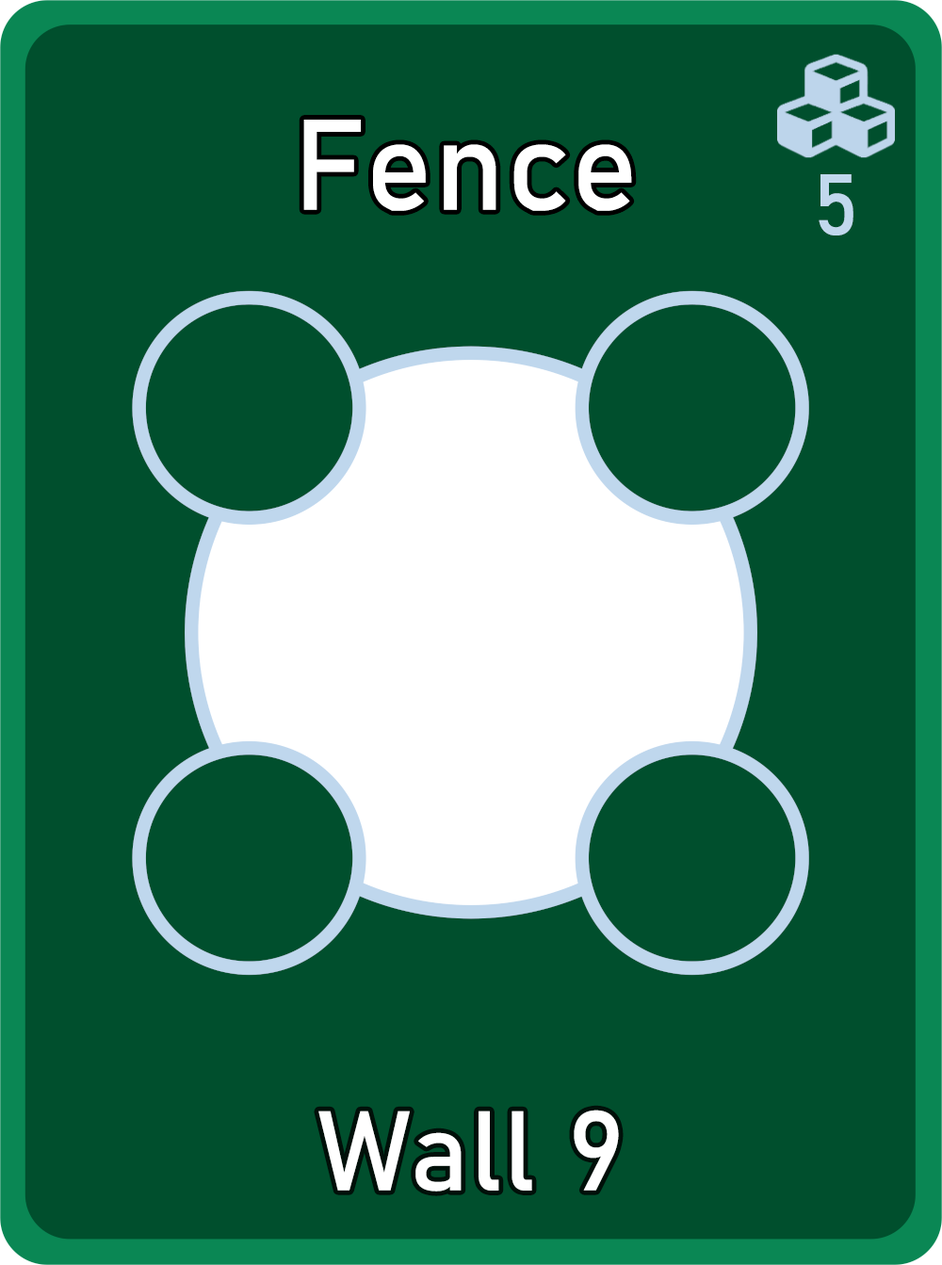
<style>
.page{position:relative;width:942px;height:1265px;background:#004f2d}
.page>*{position:absolute;margin:0}
.t1{font:126.7px "Bahnschrift";letter-spacing:0.01em;color:#ffffff}
.t2{font:85px "Bahnschrift";letter-spacing:0.01em;color:#c1d8ed}
.t3{font:111.3px "Bahnschrift";letter-spacing:0.01em;color:#ffffff}
</style>
<div class="page">
<p class="t1" style="left:303px;top:120px;width:329px;height:91px">Fence</p>
<p class="t2" style="left:819px;top:174px;width:35px;height:62px">5</p>
<p class="t3" style="left:318px;top:1110px;width:301px;height:82px">Wall 9</p>
</div>
